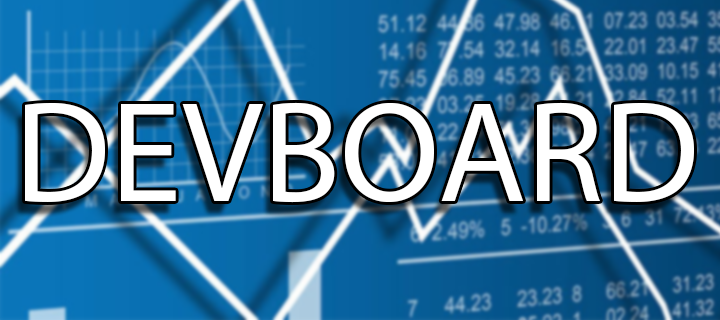
<style>
.page{position:relative;width:720px;height:320px}
.page>*{position:absolute;margin:0}
.t1{font:144px "MyriadPro-Regular";color:#ffffff}
</style>
<div class="page">
<p class="t1" style="left:25px;top:102px;width:669px;height:101px">DEVBOARD</p>
</div>
